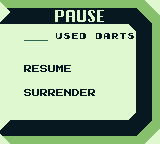
<style>
.page{position:relative;width:160px;height:144px;background:#e0f8cf}
.page>*{position:absolute;margin:0}
.t1{font:16px "Krungthep";color:#e0f8cf}
.t2{font:8px "Early-GameBoy";color:#071821}
.t3{font:8px/8px "PressStart2P-Regular";color:#071821}
</style>
<div class="page">
<p class="t1" style="left:55px;top:10px;width:49px;height:12px">PAUSE</p>
<p class="t2" style="left:56px;top:33px;width:78px;height:6px">USED  DARTS</p>
<p class="t3" style="left:24px;top:65px;width:71px;height:31px">RESUME<br><br><br>SURRENDER</p>
</div>
